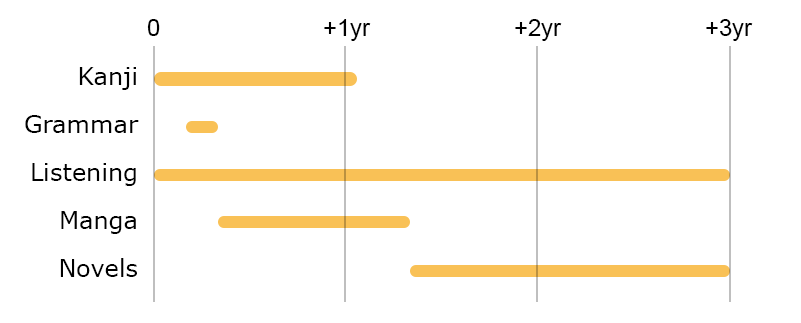
<style>
.page{position:relative;width:801px;height:323px;background:#ffffff}
.page>*{position:absolute;margin:0}
.t1{font:24px "ArialMT";color:#000000}
.t2{font:24px/48px "Verdana";color:#000000}
</style>
<div class="page">
<p class="t1" style="left:147px;top:19px;width:13px;height:17px">0</p>
<p class="t1" style="left:324px;top:19px;width:47px;height:22px">+1yr</p>
<p class="t1" style="left:515px;top:19px;width:47px;height:22px">+2yr</p>
<p class="t1" style="left:706px;top:19px;width:47px;height:22px">+3yr</p>
<p class="t2" style="left:25px;top:67px;width:114px;height:210px;text-align:right">Kanji<br>Grammar<br>Listening<br>Manga<br>Novels</p>
</div>
